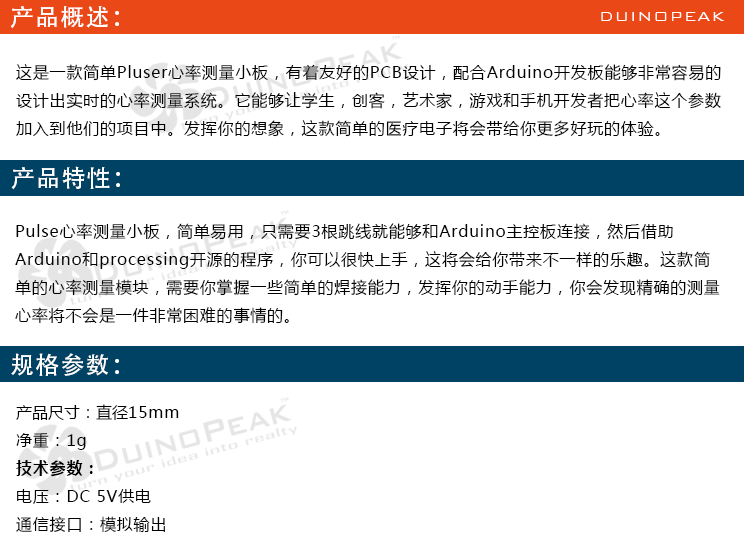
<style>
.page{position:relative;width:744px;height:547px;background:#ffffff}
.page>*{position:absolute;margin:0}
.t1{font:24px "AdobeHeitiStd-Regular";letter-spacing:0.05em;color:#ffffff}
.t2{font:18px "BankGothicBT-Light";letter-spacing:0.05em;color:#ffffff}
.t3{font:16px "MicrosoftYaHei";letter-spacing:0.05em;color:#000000}
.t4{font:16px "MicrosoftYaHei";color:#000000}
.t5{font:16px "MicrosoftYaHei-Bold";letter-spacing:0.05em;color:#000000}
</style>
<div class="page">
<p class="t1" style="left:10px;top:6px;width:109px;height:23px">产品概述：</p>
<p class="t2" style="left:601px;top:12px;width:124px;height:9px">DUINOPEAK</p>
<p class="t3" style="left:16px;top:64px;width:705px;height:73px">这是一款简单Pluser心率测量小板，有着友好的PCB设计，配合Arduino开发板能够非常容易的<br>设计出实时的心率测量系统。它能够让学生，创客，艺术家，游戏和手机开发者把心率这个参数<br>加入到他们的项目中。发挥你的想象，这款简单的医疗电子将会带给你更多好玩的体验。</p>
<p class="t1" style="left:11px;top:166px;width:109px;height:24px">产品特性：</p>
<p class="t3" style="left:15px;top:223px;width:705px;height:101px">Pulse心率测量小板，简单易用，只需要3根跳线就能够和Arduino主控板连接，然后借助<br>Arduino和processing开源的程序，你可以很快上手，这将会给你带来不一样的乐趣。这款简<br>单的心率测量模块，需要你掌握一些简单的焊接能力，发挥你的动手能力，你会发现精确的测量<br>心率将不会是一件非常困难的事情的。</p>
<p class="t1" style="left:11px;top:353px;width:108px;height:23px">规格参数：</p>
<p class="t3" style="left:16px;top:404px;width:163px;height:128px"><span class="t4">产品尺寸：直径</span>15mm<br>净重：1g<br><span class="t5">技术参数：<br></span>电压：DC 5V供电<br>通信接口：模拟输出</p>
</div>
